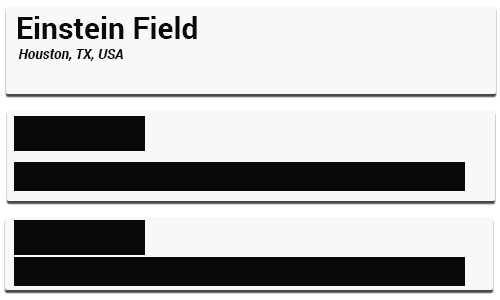
<style>
.page{position:relative;width:500px;height:300px;background:#faf7f7}
.page>*{position:absolute;margin:0}
.t1{font:30px "Roboto-Bold";color:#090909}
.t2{font:14px "Roboto-BoldItalic";color:#090909}
</style>
<div class="page">
<p class="t1" style="left:18px;top:16px;width:179px;height:23px">Einstein Field</p>
<p class="t2" style="left:18px;top:49px;width:105px;height:12px">Houston, TX, USA</p>
</div>
